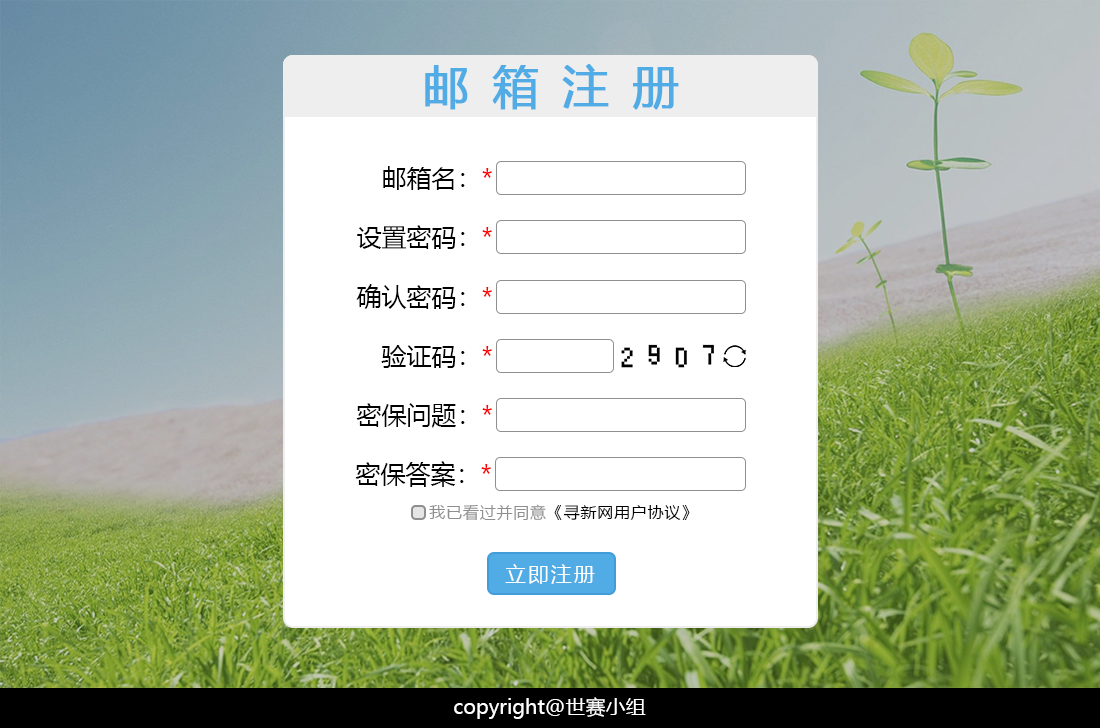
<style>
.page{position:relative;width:1100px;height:728px;background:#ffffff}
.page>*{position:absolute;margin:0}
.t1{font:45.8px "MicrosoftYaHei";letter-spacing:0.5em;color:#51abe5;font-weight:bold}
.t2{font:25px "MicrosoftYaHei";color:#000000}
.t3{font:25px "MicrosoftYaHei";color:#ff0000}
.t4{font:16px "MicrosoftYaHei";letter-spacing:0.05em;color:#000000}
.t5{font:16px "MicrosoftYaHei";letter-spacing:0.05em;color:#8f8f8f}
.t6{font:20.8px "MicrosoftYaHei";letter-spacing:0.1em;color:#fefefe}
.t7{font:20px "MicrosoftYaHei";color:#ffffff}
</style>
<div class="page">
<p class="t1" style="left:425px;top:64px;width:254px;height:46px">邮箱注册</p>
<p class="t2" style="left:383px;top:166px;width:109px;height:24px">邮箱名：<span class="t3">*</span></p>
<p class="t2" style="left:357px;top:225px;width:135px;height:24px">设置密码：<span class="t3">*</span></p>
<p class="t2" style="left:356px;top:284px;width:136px;height:25px">确认密码：<span class="t3">*</span></p>
<p class="t2" style="left:381px;top:345px;width:111px;height:23px">验证码：<span class="t3">*</span></p>
<p class="t2" style="left:356px;top:403px;width:136px;height:25px">密保问题：<span class="t3">*</span></p>
<p class="t2" style="left:355px;top:461px;width:136px;height:26px">密保答案：<span class="t3">*</span></p>
<p class="t4" style="left:429px;top:504px;width:261px;height:16px"><span class="t5">我已看过并同意</span>《寻新网用户协议》</p>
<p class="t6" style="left:505px;top:564px;width:90px;height:20px">立即注册</p>
<p class="t7" style="left:454px;top:697px;width:192px;height:22px">copyright@世赛小组</p>
</div>
